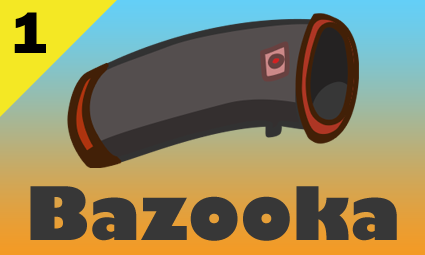
<style>
.page{position:relative;width:425px;height:255px}
.page>*{position:absolute;margin:0}
.t1{font:60px "FranklinGothic-Heavy";color:#000000}
.t2{font:72px "GillSans-UltraBold";color:#373737}
</style>
<div class="page">
<p class="t1" style="left:14px;top:12px;width:32px;height:41px">1</p>
<p class="t2" style="left:30px;top:186px;width:367px;height:55px">Bazooka</p>
</div>
